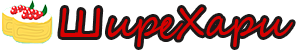
<style>
.page{position:relative;width:300px;height:50px;background:#ffffff}
.page>*{position:absolute;margin:0}
.t1{font:39.8px "SegoeScript";color:#ea0000}
</style>
<div class="page">
<p class="t1" style="left:60px;top:7px;width:233px;height:40px">ШиреХари</p>
</div>
